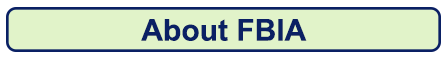
<style>
.page{position:relative;width:447px;height:60px;background:#e1f3c9}
.page>*{position:absolute;margin:0}
.t1{font:30px "Arial-BoldMT";color:#0a2064}
</style>
<div class="page">
<p class="t1" style="left:141px;top:19px;width:166px;height:22px">About FBIA</p>
</div>
